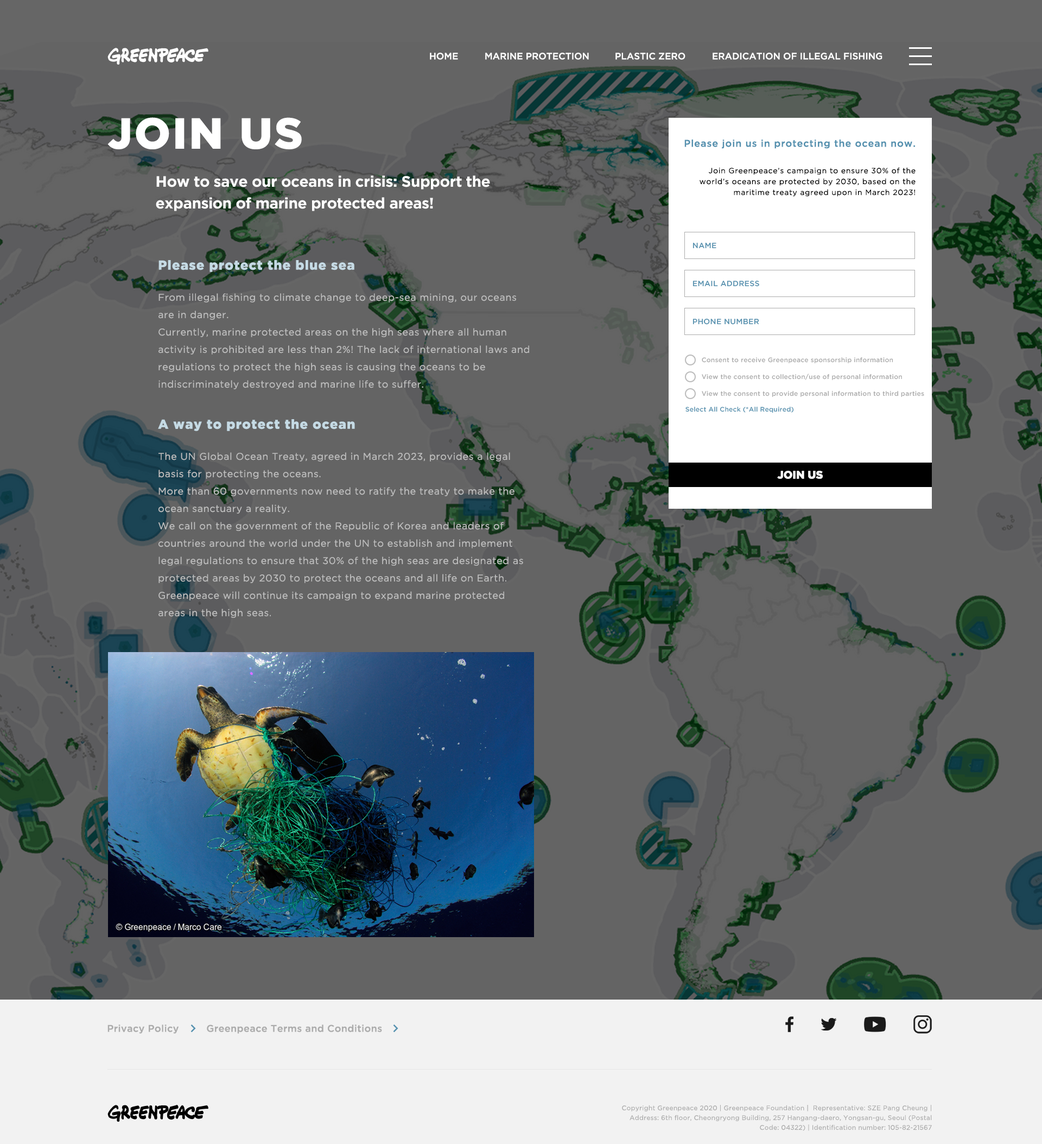
<style>
.page{position:relative;width:1042px;height:1144px;background:#646464}
.page>*{position:absolute;margin:0}
.t1{font:9.2px "GothamPro-Medium";color:#ffffff}
.t2{font:9.2px "GothamPro-Medium";color:#ffffff;text-transform:uppercase}
.t3{font:43.4px "GothamPro-Black";letter-spacing:0.05em;color:#ffffff;text-transform:uppercase}
.t4{font:9.8px "GothamPro-Medium";letter-spacing:0.05em;color:#5591af}
.t5{font:7.6px/10.9px "GothamPro";letter-spacing:0.05em;color:#000000}
.t6{font:15.2px/21.7px "GothamPro-Bold";letter-spacing:-0.02em;color:#ffffff}
.t7{font:7.6px "GothamPro-Medium";letter-spacing:0.02em;color:#5591af}
.t8{font:13px "GothamPro-Black";letter-spacing:0.05em;color:#c5dae4}
.t9{font:9.8px/17.4px "GothamPro";letter-spacing:0.032em;color:#bdbdbd}
.t10{font:6.5px "GothamPro-Medium";letter-spacing:0.02em;color:#acacac}
.t11{font:6.5px "GothamPro-Medium";letter-spacing:0.02em;color:#5591af}
.t12{font:10.9px "GothamPro-Black";color:#ffffff}
.t13{font:9.8px "GothamPro-Medium";letter-spacing:0.02em;color:#acacac}
.t14{font:6.5px/9.8px "GothamPro";letter-spacing:0.02em;color:#acacac}
</style>
<div class="page">
<p class="t1" style="left:430px;top:53px;width:28px;height:7px">HOME</p>
<p class="t2" style="left:485px;top:53px;width:104px;height:7px">marine protection</p>
<p class="t2" style="left:616px;top:53px;width:70px;height:7px">plastic zero</p>
<p class="t2" style="left:713px;top:53px;width:170px;height:7px">eradication of illegal fishing</p>
<p class="t3" style="left:107px;top:117px;width:195px;height:32px">Join us</p>
<p class="t4" style="left:685px;top:140px;width:230px;height:9px">Please join us in protecting the ocean now.</p>
<p class="t5" style="left:700px;top:167px;width:216px;height:30px;text-align:right">Join Greenpeace’s campaign to ensure 30% of the<br>world’s oceans are protected by 2030, based on the<br>maritime treaty agreed upon in March 2023!</p>
<p class="t6" style="left:156px;top:175px;width:334px;height:36px">How to save our oceans in crisis: Support the<br>expansion of marine protected areas!</p>
<p class="t7" style="left:693px;top:243px;width:24px;height:6px">NAME</p>
<p class="t8" style="left:159px;top:260px;width:196px;height:12px">Please protect the blue sea</p>
<p class="t7" style="left:693px;top:280px;width:67px;height:7px">EMAIL ADDRESS</p>
<p class="t9" style="left:159px;top:293px;width:370px;height:96px">From illegal fishing to climate change to deep-sea mining, our oceans<br>are in danger.<br>Currently, marine protected areas on the high seas where all human<br>activity is prohibited are less than 2%! The lack of international laws and<br>regulations to protect the high seas is causing the oceans to be<br>indiscriminately destroyed and marine life to suffer.</p>
<p class="t7" style="left:693px;top:318px;width:67px;height:7px">PHONE NUMBER</p>
<p class="t10" style="left:702px;top:357px;width:192px;height:7px">Consent to receive Greenpeace sponsorship information</p>
<p class="t10" style="left:702px;top:374px;width:200px;height:6px">View the consent to collection/use of personal information</p>
<p class="t10" style="left:702px;top:391px;width:223px;height:6px">View the consent to provide personal information to third parties</p>
<p class="t11" style="left:686px;top:407px;width:108px;height:6px">Select All Check (*All Required)</p>
<p class="t8" style="left:158px;top:419px;width:197px;height:12px">A way to protect the ocean</p>
<p class="t9" style="left:158px;top:452px;width:365px;height:166px">The UN Global Ocean Treaty, agreed in March 2023, provides a legal basis for protecting the oceans.<br>More than 60 governments now need to ratify the treaty to make the ocean sanctuary a reality.<br>We call on the government of the Republic of Korea and leaders of countries around the world under the UN to establish and implement legal regulations to ensure that 30% of the high seas are designated as protected areas by 2030 to protect the oceans and all life on Earth.<br>Greenpeace will continue its campaign to expand marine protected areas in the high seas.</p>
<p class="t12" style="left:777px;top:471px;width:46px;height:8px">JOIN US</p>
<p class="t13" style="left:107px;top:1024px;width:72px;height:10px">Privacy Policy</p>
<p class="t13" style="left:207px;top:1024px;width:175px;height:10px">Greenpeace Terms and Conditions</p>
<p class="t14" style="left:622px;top:1105px;width:310px;height:26px;text-align:right">Copyright Greenpeace 2020 | Greenpeace Foundation |  Representative: SZE Pang Cheung | Address: 6th floor, Cheongryong Building, 257 Hangang-daero, Yongsan-gu, Seoul (Postal Code: 04322) | Identification number: 105-82-21567</p>
</div>
